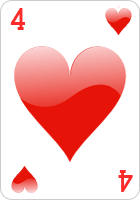
<style>
.page{position:relative;width:140px;height:200px;background:#ffffff}
.page>*{position:absolute;margin:0}
.t1{font:26px "CardCharacters";color:#ff2b2b}
</style>
<div class="page">
<p class="t1" style="left:10px;top:8px;width:15px;height:22px">4</p>
<p class="t1" style="left:118px;top:170px;width:15px;height:22px;rotate:180deg">4</p>
</div>
